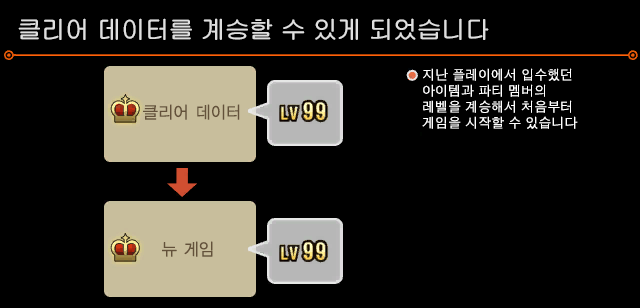
<style>
.page{position:relative;width:640px;height:308px;background:#000000}
.page>*{position:absolute;margin:0}
.t1{font:24px "H2drrB";color:#dfdfdf}
.t2{font:13.3px "H2gtrM";letter-spacing:-0.025em;color:#ffffff}
.t3{font:16px "KoreanGD-L";color:#63513a;font-weight:bold}
</style>
<div class="page">
<p class="t1" style="left:18px;top:18px;width:471px;height:22px">클리어 데이터를 계승할 수 있게 되었습니다</p>
<p class="t2" style="left:422px;top:68px;width:156px;height:61px">지난 플레이에서 입수했던<br>아이템과 파티 멤버의<br>레벨을 계승해서 처음부터<br>게임을 시작할 수 있습니다</p>
<p class="t3" style="left:143px;top:104px;width:97px;height:16px">클리어 데이터</p>
<p class="t3" style="left:162px;top:241px;width:51px;height:16px">뉴 게임</p>
</div>
